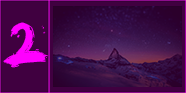
<style>
.page{position:relative;width:186px;height:93px;background:#400040}
.page>*{position:absolute;margin:0}
.t1{font:60px "LeviReBrushed";color:#ff00ff}
</style>
<div class="page">
<p class="t1" style="left:3px;top:22px;width:45px;height:46px">2</p>
</div>
